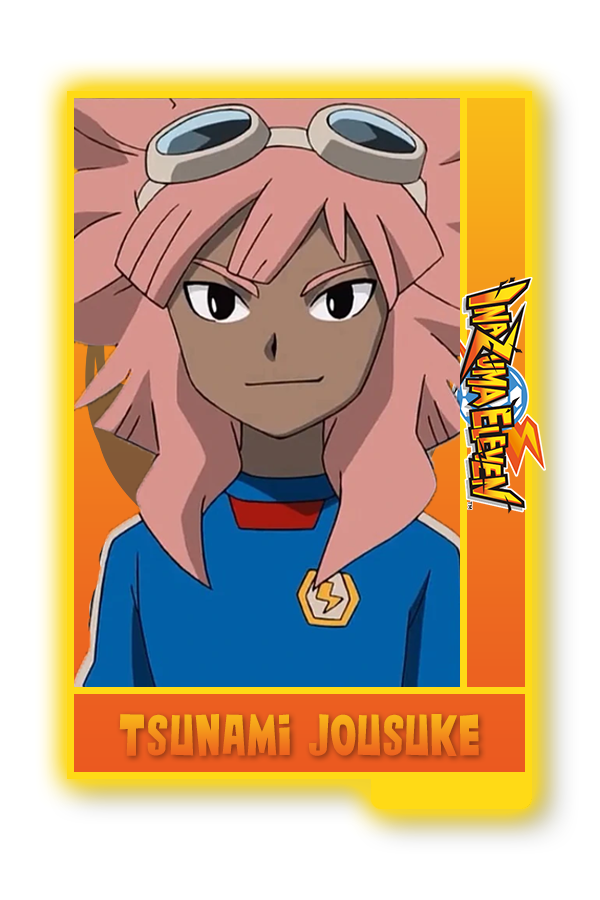
<style>
.page{position:relative;width:600px;height:900px;background:#ffffff}
.page>*{position:absolute;margin:0}
.t1{font:60.3px "TTG-Bold"}
</style>
<div class="page">
<p class="t1" style="left:119px;top:714px;width:360px;height:42px">Tsunami Jousuke</p>
</div>
